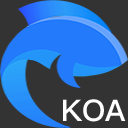
<style>
.page{position:relative;width:128px;height:128px;background:#333333}
.page>*{position:absolute;margin:0}
.t1{font:29.9px "PingFangSC-Semibold";color:#ffffff}
</style>
<div class="page">
<p class="t1" style="left:63px;top:99px;width:63px;height:23px">KOA</p>
</div>
